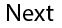
<style>
.page{position:relative;width:62px;height:28px;background:#ffffff}
.page>*{position:absolute;margin:0}
.t1{font:25px "MyriadPro-Regular";color:#000000}
</style>
<div class="page">
<p class="t1" style="left:7px;top:4px;width:47px;height:17px">Next</p>
</div>
